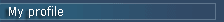
<style>
.page{position:relative;width:224px;height:22px;background:#314965}
.page>*{position:absolute;margin:0}
.t1{font:12.1px "Verdana";color:#ffffff;scale:0.91 1}
</style>
<div class="page">
<p class="t1" style="left:9px;top:6px;width:54px;height:12px">My profile</p>
</div>
